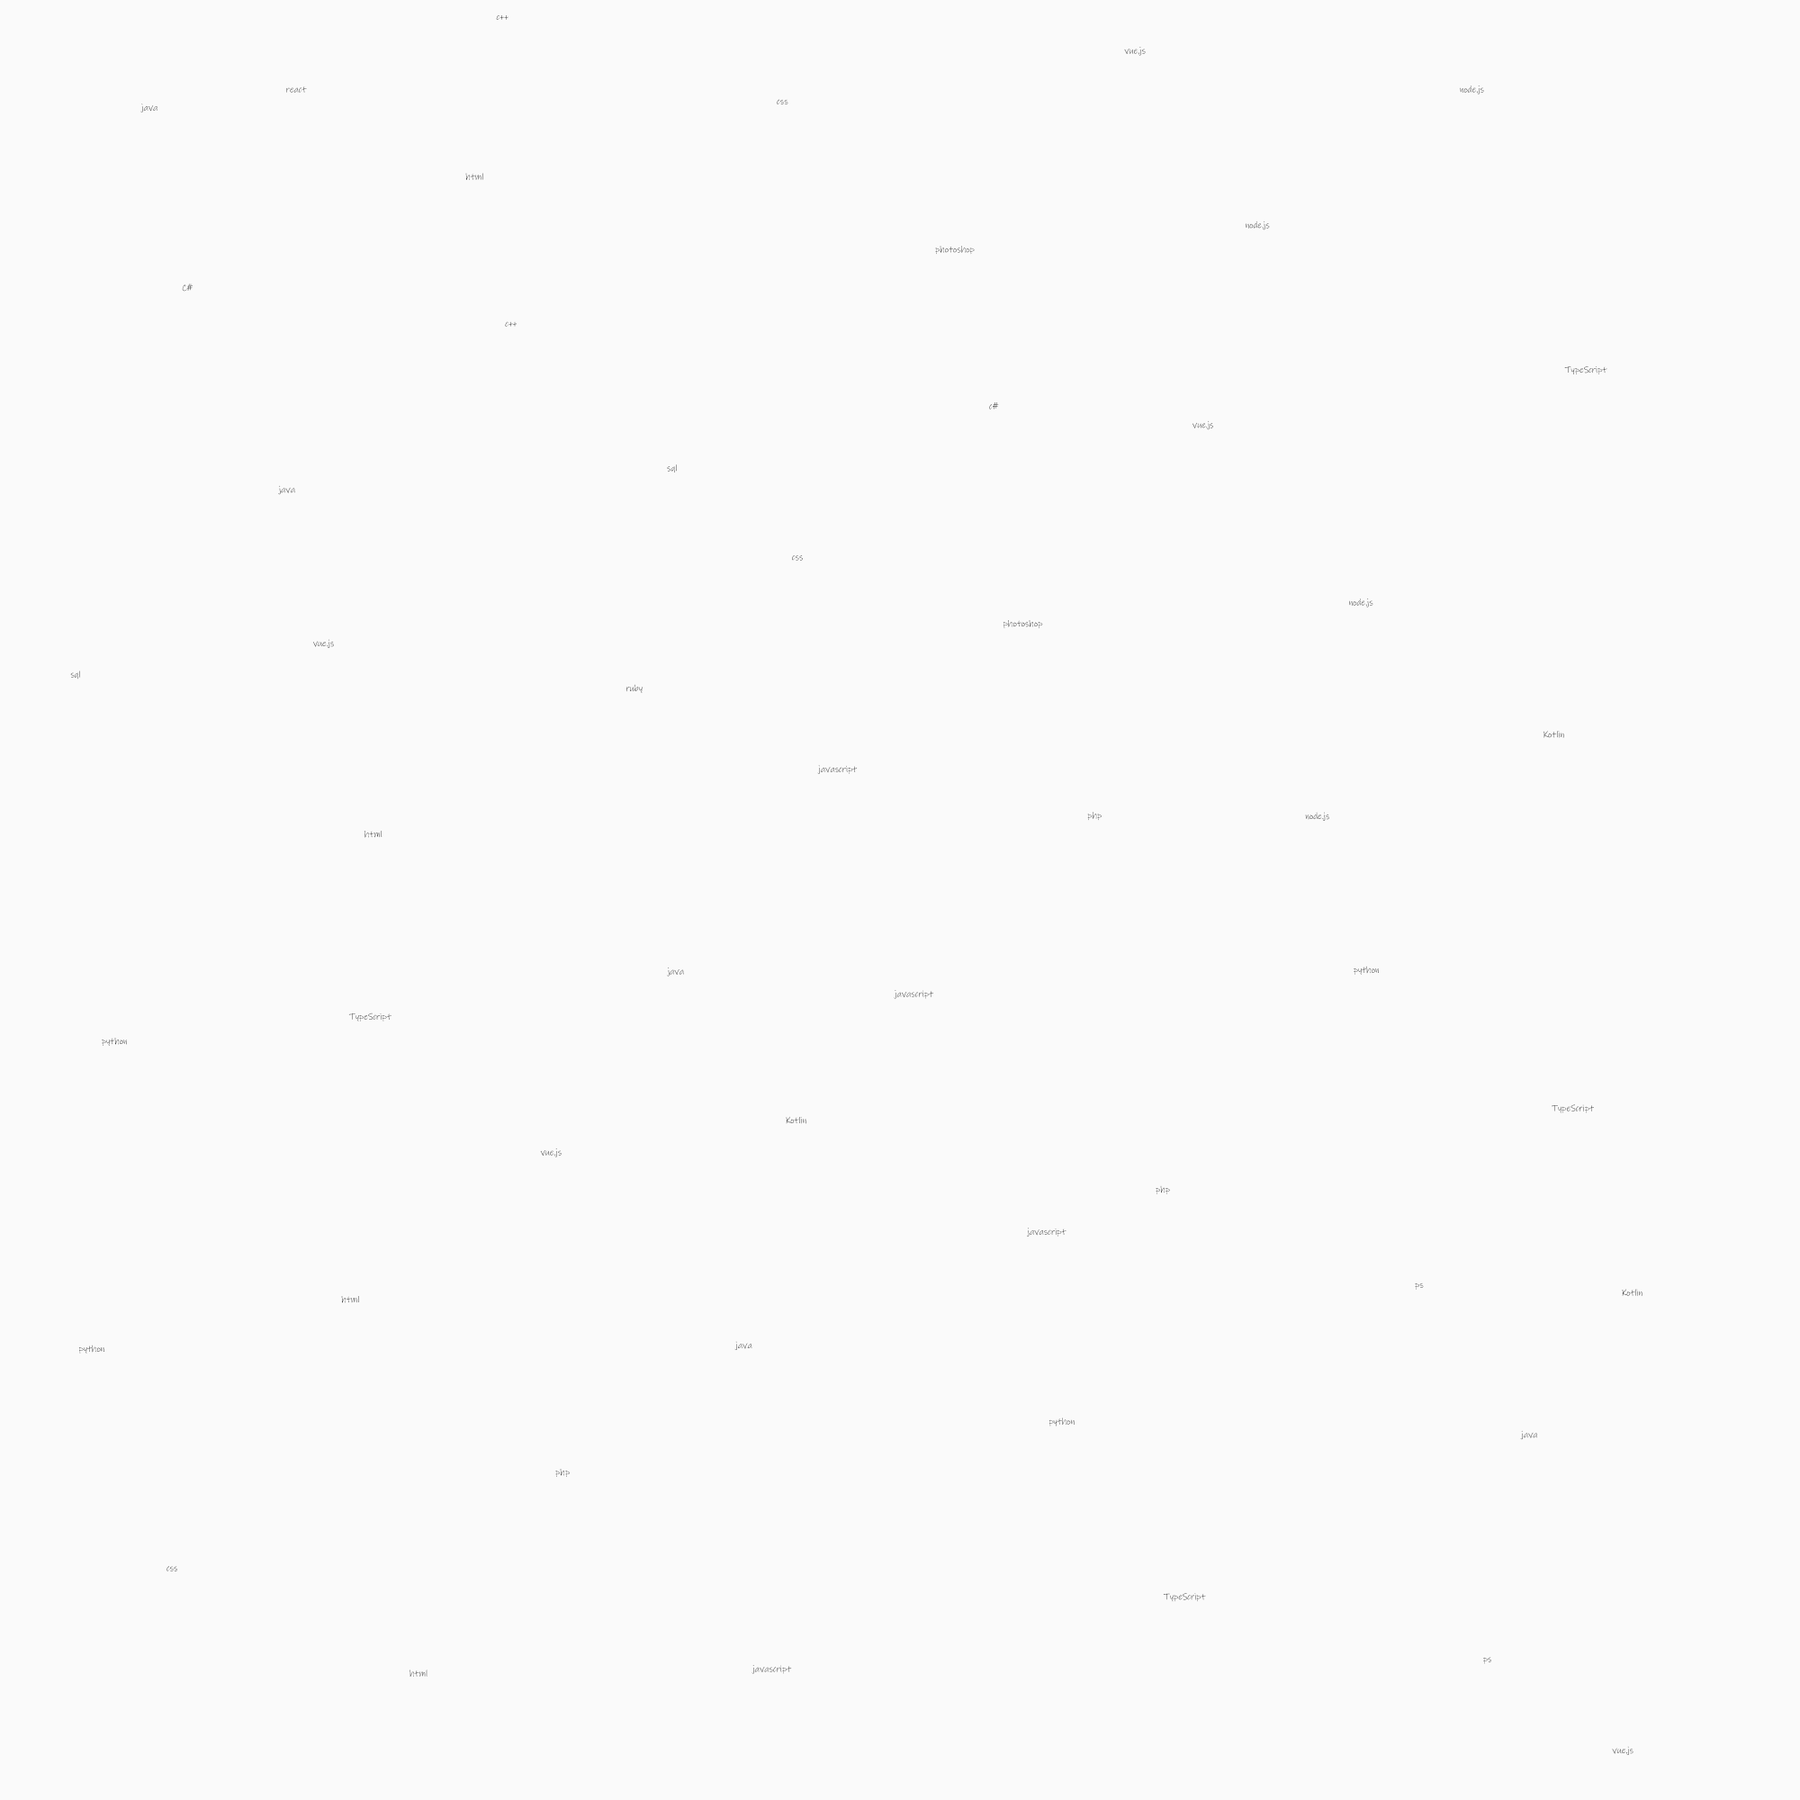
<style>
.page{position:relative;width:1800px;height:1800px;background:#fafafa}
.page>*{position:absolute;margin:0}
.t1{font:9px "InkFree"}
</style>
<div class="page">
<p class="t1" style="left:496px;top:15px;width:12px;height:5px">c++</p>
<p class="t1" style="left:1124px;top:47px;width:22px;height:9px">vue.js</p>
<p class="t1" style="left:286px;top:86px;width:21px;height:7px">react</p>
<p class="t1" style="left:1460px;top:86px;width:24px;height:8px">node.js</p>
<p class="t1" style="left:777px;top:99px;width:11px;height:5px">css</p>
<p class="t1" style="left:140px;top:104px;width:18px;height:8px">java</p>
<p class="t1" style="left:465px;top:173px;width:18px;height:7px">html</p>
<p class="t1" style="left:1246px;top:220px;width:24px;height:10px">node.js</p>
<p class="t1" style="left:935px;top:246px;width:40px;height:9px">photoshop</p>
<p class="t1" style="left:182px;top:284px;width:11px;height:8px">C#</p>
<p class="t1" style="left:505px;top:321px;width:12px;height:6px">c++</p>
<p class="t1" style="left:1564px;top:366px;width:43px;height:8px">TypeScript</p>
<p class="t1" style="left:989px;top:402px;width:10px;height:8px">c#</p>
<p class="t1" style="left:1192px;top:420px;width:21px;height:10px">vue.js</p>
<p class="t1" style="left:667px;top:464px;width:10px;height:8px">sql</p>
<p class="t1" style="left:278px;top:485px;width:17px;height:10px">java</p>
<p class="t1" style="left:792px;top:555px;width:11px;height:6px">css</p>
<p class="t1" style="left:1349px;top:598px;width:24px;height:10px">node.js</p>
<p class="t1" style="left:1003px;top:620px;width:40px;height:8px">photoshop</p>
<p class="t1" style="left:313px;top:639px;width:21px;height:9px">vue.js</p>
<p class="t1" style="left:70px;top:670px;width:10px;height:10px">sql</p>
<p class="t1" style="left:626px;top:684px;width:17px;height:9px">ruby</p>
<p class="t1" style="left:1544px;top:731px;width:20px;height:7px">Kotlin</p>
<p class="t1" style="left:817px;top:765px;width:41px;height:9px">javascript</p>
<p class="t1" style="left:1087px;top:812px;width:15px;height:9px">php</p>
<p class="t1" style="left:1305px;top:812px;width:24px;height:9px">node.js</p>
<p class="t1" style="left:364px;top:831px;width:18px;height:7px">html</p>
<p class="t1" style="left:1354px;top:966px;width:25px;height:9px">python</p>
<p class="t1" style="left:667px;top:968px;width:17px;height:8px">java</p>
<p class="t1" style="left:894px;top:990px;width:39px;height:9px">javascript</p>
<p class="t1" style="left:348px;top:1012px;width:44px;height:10px">TypeScript</p>
<p class="t1" style="left:102px;top:1038px;width:25px;height:8px">python</p>
<p class="t1" style="left:1552px;top:1104px;width:42px;height:9px">TypeScript</p>
<p class="t1" style="left:786px;top:1116px;width:20px;height:8px">Kotlin</p>
<p class="t1" style="left:540px;top:1148px;width:22px;height:9px">vue.js</p>
<p class="t1" style="left:1156px;top:1185px;width:14px;height:9px">php</p>
<p class="t1" style="left:1027px;top:1228px;width:39px;height:9px">javascript</p>
<p class="t1" style="left:1415px;top:1282px;width:9px;height:8px">ps</p>
<p class="t1" style="left:1622px;top:1289px;width:20px;height:7px">Kotlin</p>
<p class="t1" style="left:341px;top:1296px;width:18px;height:7px">html</p>
<p class="t1" style="left:78px;top:1345px;width:26px;height:9px">python</p>
<p class="t1" style="left:734px;top:1341px;width:18px;height:9px">java</p>
<p class="t1" style="left:1048px;top:1418px;width:27px;height:8px">python</p>
<p class="t1" style="left:1520px;top:1430px;width:17px;height:10px">java</p>
<p class="t1" style="left:555px;top:1469px;width:15px;height:8px">php</p>
<p class="t1" style="left:166px;top:1566px;width:11px;height:5px">css</p>
<p class="t1" style="left:1163px;top:1593px;width:43px;height:9px">TypeScript</p>
<p class="t1" style="left:1483px;top:1657px;width:8px;height:7px">ps</p>
<p class="t1" style="left:410px;top:1670px;width:18px;height:7px">html</p>
<p class="t1" style="left:752px;top:1665px;width:40px;height:9px">javascript</p>
<p class="t1" style="left:1612px;top:1746px;width:22px;height:9px">vue.js</p>
</div>
